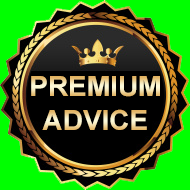
<style>
.page{position:relative;width:190px;height:190px;background:#00ff00}
.page>*{position:absolute;margin:0}
.t1{font:28px "Arial-BoldMT"}
</style>
<div class="page">
<p class="t1" style="left:31px;top:76px;width:129px;height:21px">PREMIUM</p>
<p class="t1" style="left:42px;top:109px;width:105px;height:21px">ADVICE</p>
</div>
